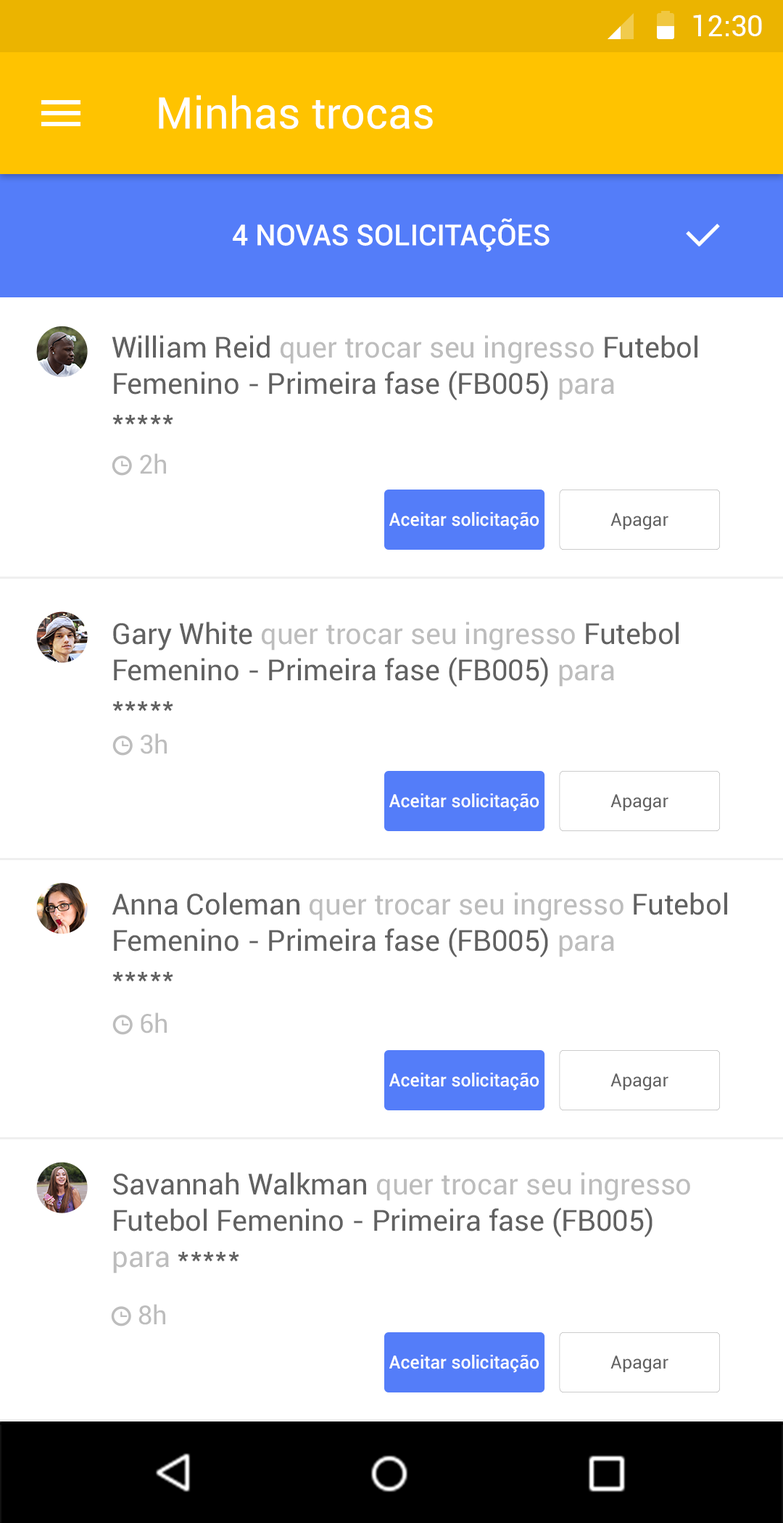
<style>
.page{position:relative;width:783px;height:1523px;background:#ffffff}
.page>*{position:absolute;margin:0}
.t1{font:29px "Roboto-Regular";color:#ffffff}
.t2{font:43.5px "Roboto-Regular";color:#ffffff}
.t3{font:29px "Roboto-Medium";color:#ffffff;text-transform:uppercase}
.t4{font:29px "Roboto-Medium";color:#ffffff}
.t5{font:29px/36.3px "Roboto-Regular";color:#616161}
.t6{font:29px/36.3px "Roboto-Regular";color:#bdbdbd}
.t7{font:26.1px "Roboto-Regular";color:#bdbdbd}
.t8{font:18.1px "Roboto-Medium";color:#fefefe}
.t9{font:18.1px "Roboto-Regular";color:#616161}
</style>
<div class="page">
<p class="t1" style="left:693px;top:15px;width:69px;height:21px">12:30</p>
<p class="t2" style="left:159px;top:95px;width:274px;height:34px">Minhas trocas</p>
<p class="t3" style="left:233px;top:218px;width:317px;height:34px">4 NOVAS SOLICITA<span class="t4">ÇÕ</span>ES</p>
<p class="t5" style="left:112px;top:335px;width:586px;height:90px">William Reid<span class="t6"> quer trocar seu ingresso </span>Futebol <br>Femenino - Primeira fase (FB005) <span class="t6">para <br></span>*****</p>
<p class="t7" style="left:140px;top:453px;width:26px;height:20px">2h</p>
<p class="t8" style="left:389px;top:512px;width:150px;height:18px">Aceitar solicitação</p>
<p class="t9" style="left:611px;top:513px;width:58px;height:17px">Apagar</p>
<p class="t5" style="left:112px;top:621px;width:567px;height:90px">Gary White<span class="t6"> quer trocar seu ingresso </span>Futebol <br>Femenino - Primeira fase (FB005) <span class="t6">para <br></span>*****</p>
<p class="t7" style="left:141px;top:733px;width:26px;height:21px">3h</p>
<p class="t8" style="left:389px;top:793px;width:150px;height:18px">Aceitar solicitação</p>
<p class="t9" style="left:611px;top:794px;width:58px;height:17px">Apagar</p>
<p class="t5" style="left:112px;top:892px;width:615px;height:90px">Anna Coleman<span class="t6"> quer trocar seu ingresso </span>Futebol <br>Femenino - Primeira fase (FB005) <span class="t6">para <br></span>*****</p>
<p class="t7" style="left:141px;top:1012px;width:26px;height:21px">6h</p>
<p class="t8" style="left:389px;top:1072px;width:150px;height:19px">Aceitar solicitação</p>
<p class="t9" style="left:611px;top:1073px;width:58px;height:18px">Apagar</p>
<p class="t5" style="left:113px;top:1172px;width:577px;height:101px">Savannah Walkman<span class="t6"> quer trocar seu ingresso <br></span>Futebol Femenino - Primeira fase (FB005) <br><span class="t6">para </span>*****</p>
<p class="t7" style="left:138px;top:1304px;width:27px;height:21px">8h</p>
<p class="t8" style="left:389px;top:1354px;width:150px;height:19px">Aceitar solicitação</p>
<p class="t9" style="left:611px;top:1355px;width:58px;height:18px">Apagar</p>
</div>
